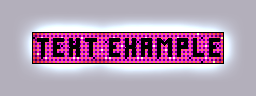
<style>
.page{position:relative;width:256px;height:96px;background:#b3afbb}
.page>*{position:absolute;margin:0}
.t1{font:25.7px "FutureMillennium";color:#000000}
</style>
<div class="page">
<p class="t1" style="left:37px;top:38px;width:183px;height:19px">Text example</p>
</div>
